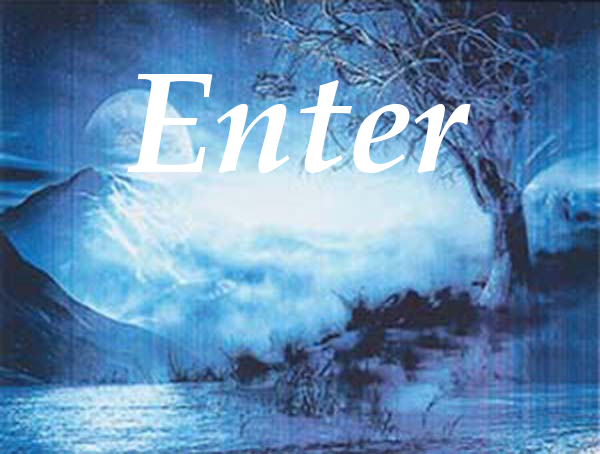
<style>
.page{position:relative;width:600px;height:454px}
.page>*{position:absolute;margin:0}
.t1{font:141.7px "BookAntiqua-BoldItalic";color:#ffffff}
</style>
<div class="page">
<p class="t1" style="left:127px;top:74px;width:344px;height:99px">Enter</p>
</div>
